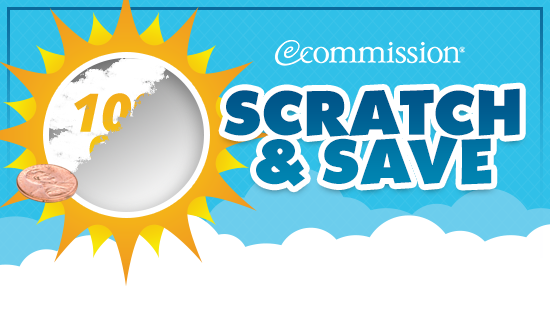
<style>
.page{position:relative;width:550px;height:311px;background:#ffffff}
.page>*{position:absolute;margin:0}
.t1{font:57.8px/48.6px "Walibi-Bold";color:#006798;text-transform:uppercase}
</style>
<div class="page">
<p class="t1" style="left:224px;top:88px;width:296px;height:99px;text-align:center">Scratch<br>&amp; Save</p>
</div>
